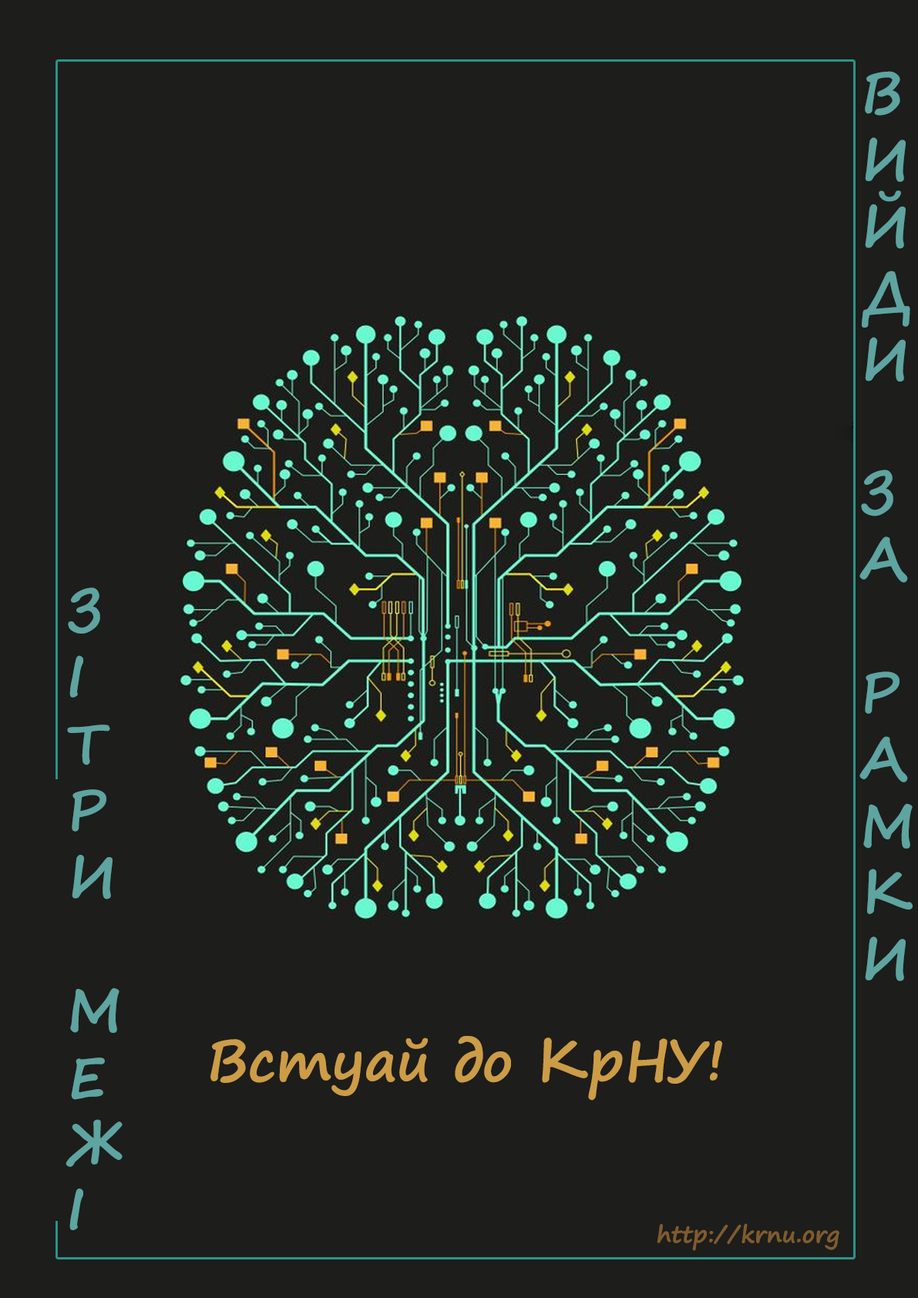
<style>
.page{position:relative;width:918px;height:1298px;background:#1d1d1b}
.page>*{position:absolute;margin:0}
.t1{font:55.5px "SegoePrint-Bold";color:#5ea4a0}
.t2{font:55.5px "SegoePrint-Bold";color:#cc9c47}
.t3{font:23.1px "SegoePrint-Bold";color:#7f5c2e}
</style>
<div class="page">
<p class="t1" style="left:860px;top:71px;width:53px;height:911px;text-align:right">В<br>И<br>Й<br>Д<br>И<br><br>З<br>А<br><br>Р<br>А<br>М<br>К<br>И</p>
<p class="t1" style="left:66px;top:588px;width:57px;height:643px;text-align:right">З<br>І<br>Т<br>Р<br>И<br><br>М<br>Е<br>Ж<br>І</p>
<p class="t2" style="left:211px;top:1036px;width:511px;height:65px">Встуай до КрНУ!</p>
<p class="t3" style="left:657px;top:1224px;width:183px;height:27px">http://krnu.org</p>
</div>
